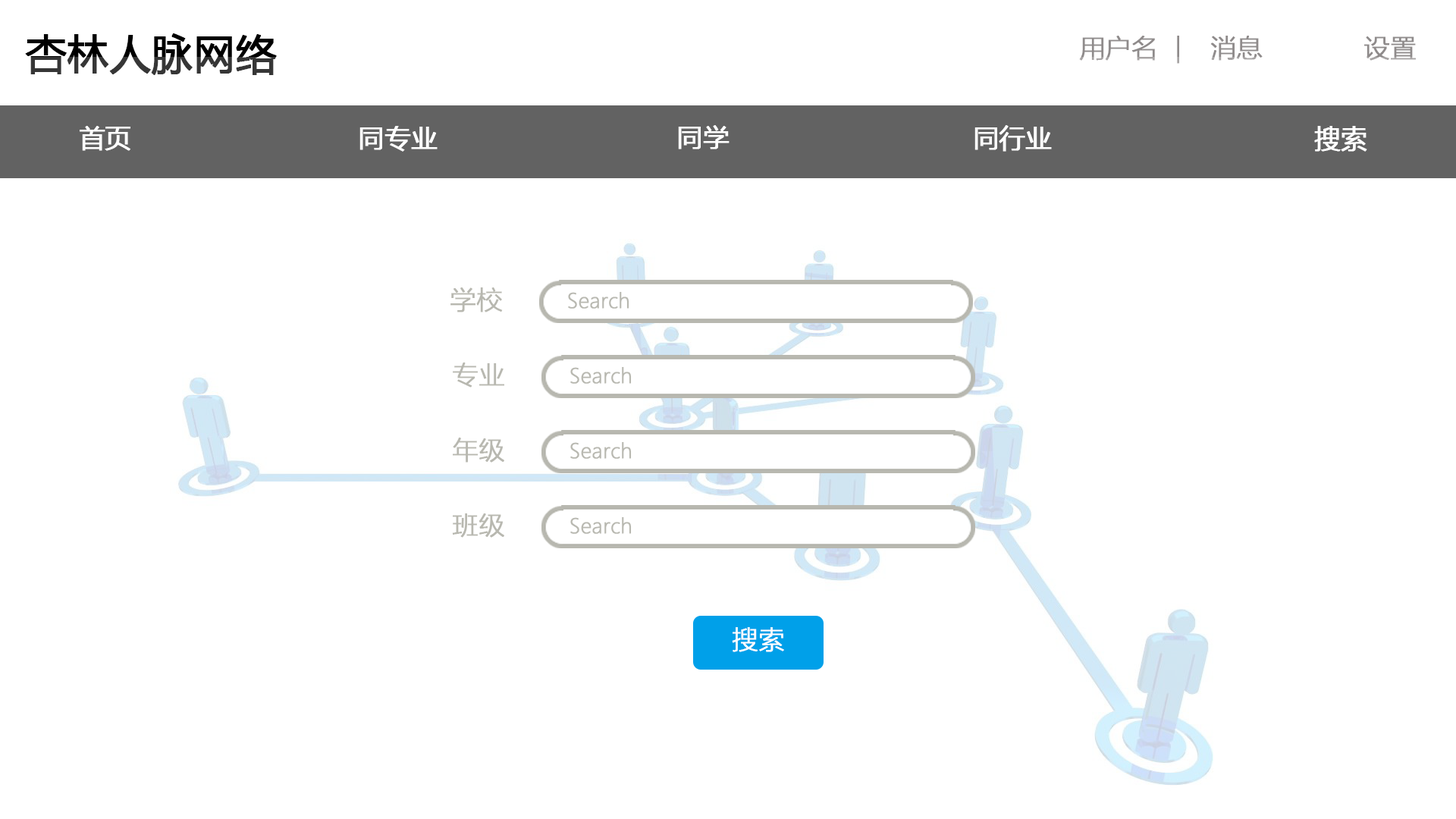
<style>
.page{position:relative;width:1456px;height:819px;background:#ffffff}
.page>*{position:absolute;margin:0}
.t1{font:40.9px "MicrosoftYaHei";font-weight:bold}
.t2{font:25.8px "MicrosoftYaHeiLight";color:#8f8b8b;font-weight:bold}
.t3{font:25.8px "MicrosoftYaHei";color:#ffffff;font-weight:bold}
.t4{font:25.8px "MicrosoftYaHeiLight";color:#b8b8b0;font-weight:bold}
.t5{font:19.9px "MicrosoftYaHeiLight";color:#b8b8b0;font-weight:bold}
.t6{font:25.8px "MicrosoftYaHeiLight";color:#ffffff;font-weight:bold}
</style>
<div class="page">
<p class="t1" style="left:25px;top:33px;width:252px;height:42px">杏林人脉网络</p>
<p class="t2" style="left:1079px;top:36px;width:100px;height:28px">用户名  |</p>
<p class="t2" style="left:1210px;top:36px;width:53px;height:25px">消息</p>
<p class="t2" style="left:1364px;top:36px;width:52px;height:25px">设置</p>
<p class="t3" style="left:80px;top:126px;width:50px;height:25px">首页</p>
<p class="t3" style="left:359px;top:126px;width:79px;height:26px">同专业</p>
<p class="t3" style="left:678px;top:125px;width:52px;height:24px">同学</p>
<p class="t3" style="left:974px;top:125px;width:78px;height:27px">同行业</p>
<p class="t3" style="left:1314px;top:126px;width:53px;height:26px">搜索</p>
<p class="t4" style="left:450px;top:287px;width:53px;height:25px">学校</p>
<p class="t5" style="left:568px;top:291px;width:61px;height:18px">Search</p>
<p class="t4" style="left:453px;top:362px;width:51px;height:26px">专业</p>
<p class="t5" style="left:570px;top:366px;width:62px;height:18px">Search</p>
<p class="t4" style="left:453px;top:438px;width:51px;height:25px">年级</p>
<p class="t5" style="left:570px;top:441px;width:62px;height:18px">Search</p>
<p class="t4" style="left:452px;top:513px;width:52px;height:25px">班级</p>
<p class="t5" style="left:570px;top:516px;width:62px;height:18px">Search</p>
<p class="t6" style="left:732px;top:627px;width:52px;height:25px">搜索</p>
</div>
